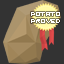
<style>
.page{position:relative;width:64px;height:64px;background:#333333}
.page>*{position:absolute;margin:0}
.t1{font:10px "VisitorTT2BRK";color:#ffffff}
</style>
<div class="page">
<p class="t1" style="left:31px;top:12px;width:29px;height:4px">POTATO</p>
<p class="t1" style="left:31px;top:19px;width:29px;height:4px">PROVED</p>
</div>
